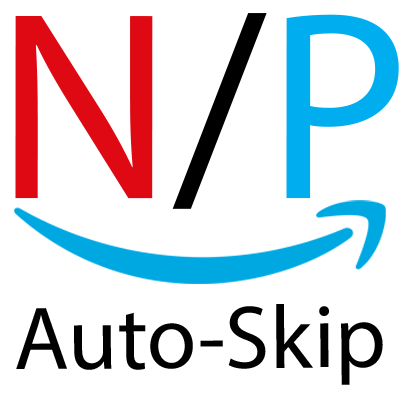
<style>
.page{position:relative;width:400px;height:400px;background:#ffffff}
.page>*{position:absolute;margin:0}
.t1{font:270px "MyriadPro-Regular";color:#de0913}
.t2{font:270px "MyriadPro-Regular";color:#000000}
.t3{font:270px "MyriadPro-Regular";color:#00aeef}
.t4{font:90px "MyriadPro-Regular";color:#000000}
</style>
<div class="page">
<p class="t1" style="left:15px;top:13px;width:384px;height:196px">N<span class="t2">/</span><span class="t3">P</span></p>
<p class="t4" style="left:16px;top:304px;width:367px;height:81px">Auto-Skip</p>
</div>
